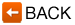
<style>
.page{position:relative;width:75px;height:25px;background:#ffffff}
.page>*{position:absolute;margin:0}
.t1{font:17.1px "HelveticaNeue";color:#000000}
</style>
<div class="page">
<p class="t1" style="left:26px;top:6px;width:46px;height:14px">BACK</p>
</div>
